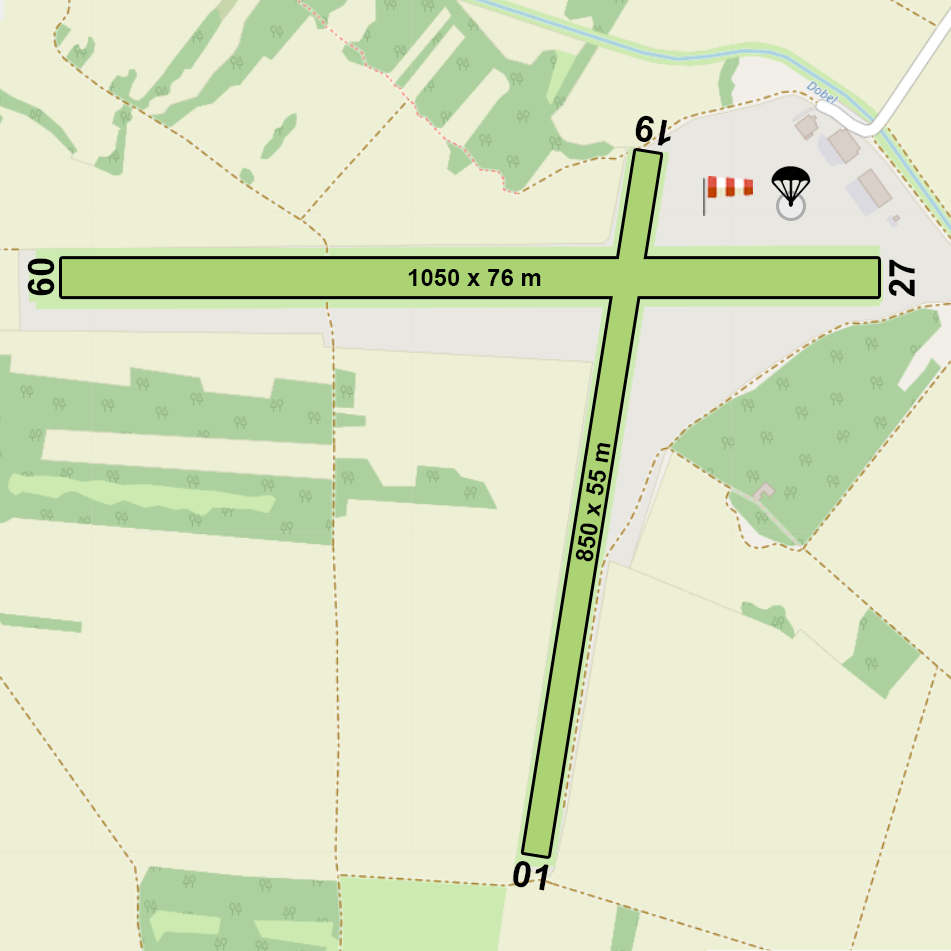
<style>
.page{position:relative;width:951px;height:951px;background:#eef0d5}
.page>*{position:absolute;margin:0}
.t1{font:36px "Arial-BoldMT";color:#000000}
.t2{font:24px "Arial-BoldMT";color:#000000}
</style>
<div class="page">
<p class="t1" style="left:635px;top:115px;width:36px;height:31px;rotate:-170deg">19</p>
<p class="t1" style="left:27px;top:258px;width:28px;height:38px;rotate:90deg">09</p>
<p class="t2" style="left:408px;top:269px;width:133px;height:17px">1050 x 76 m</p>
<p class="t1" style="left:888px;top:259px;width:27px;height:38px;rotate:-90deg">27</p>
<p class="t2" style="left:575px;top:443px;width:36px;height:119px;rotate:-81deg">850 x 55 m</p>
<p class="t1" style="left:513px;top:861px;width:36px;height:30px;rotate:10deg">01</p>
</div>
